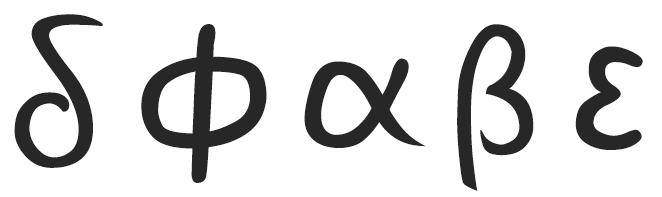
<style>
.page{position:relative;width:662px;height:197px;background:#ffffff}
.page>*{position:absolute;margin:0}
.t1{font:220px "GunnyRewritten";color:#272727;scale:1.1 1}
.t2{font:240px "GunnyRewritten";color:#272727;scale:1.1 1}
.t3{font:200px "GunnyRewritten";color:#272727;scale:1.1 1}
.t4{font:280px "GunnyRewritten";color:#272727;scale:1.1 1}
.t5{font:140px "GunnyRewritten";color:#272727;scale:1.1 1}
</style>
<div class="page">
<p class="t1" style="left:14px;top:14px;width:89px;height:154px">δ</p>
<p class="t2" style="left:141px;top:24px;width:126px;height:159px">ф</p>
<p class="t3" style="left:457px;top:24px;width:77px;height:167px">β</p>
<p class="t4" style="left:575px;top:46px;width:68px;height:104px">ε<br><span class="t5"></span></p>
<p class="t2" style="left:304px;top:58px;width:122px;height:90px">α</p>
</div>
